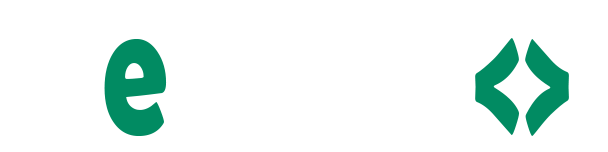
<style>
.page{position:relative;width:608px;height:152px;background:#ffffff}
.page>*{position:absolute;margin:0}
.t1{font:189.9px "BerlinSansFBDemi-Bold";color:#018b62;scale:0.69 1}
.t2{font:194.5px "BerlinSansFBDemi-Bold";color:#018b62;scale:0.65 1}
</style>
<div class="page">
<p class="t1" style="left:104px;top:39px;width:63px;height:97px">e</p>
<p class="t2" style="left:475px;top:38px;width:94px;height:98px">&lt;&gt;</p>
</div>
